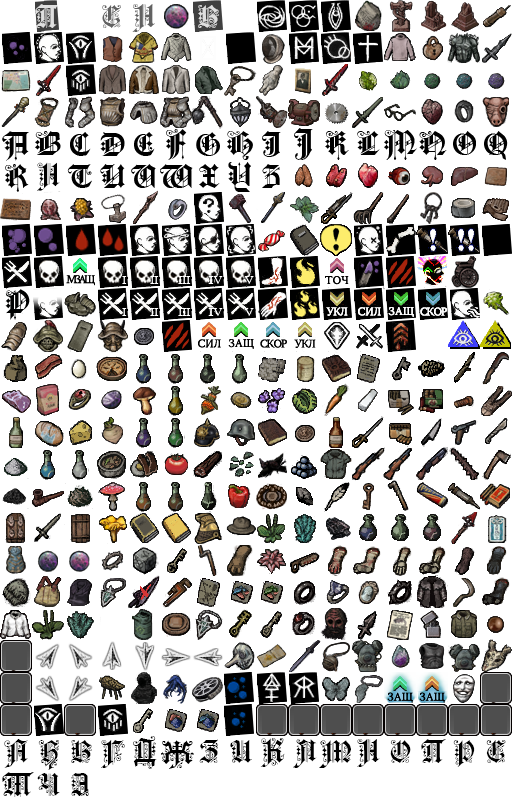
<style>
.page{position:relative;width:512px;height:800px;background:#ffffff}
.page>*{position:absolute;margin:0}
.t1{font:30px "FortunaGothicFlorishC";color:#dfdfdf}
.t2{font:30px "FortunaGothicFlorishC";color:#626262}
.t3{font:30px "FortunaGothicFlorishC";color:#000000}
.t4{font:12px "CrimsonText-Regular";letter-spacing:-0.2em;color:#000000}
.t5{font:12px "CrimsonText-Regular";color:#000000}
.t6{font:12px "CrimsonText-Regular";letter-spacing:-0.1em;color:#ffffff}
.t7{font:12px "CrimsonText-Regular";color:#ffffff}
.t8{font:12px "CrimsonText-Regular";letter-spacing:-0.1em;color:#000000}
</style>
<div class="page">
<p class="t1" style="left:35px;top:4px;width:25px;height:24px">П</p>
<p class="t2" style="left:102px;top:5px;width:19px;height:23px">С</p>
<p class="t2" style="left:132px;top:4px;width:23px;height:28px">Н</p>
<p class="t1" style="left:198px;top:5px;width:21px;height:23px">В</p>
<p class="t3" style="left:37px;top:162px;width:23px;height:29px">Н</p>
<p class="t4" style="left:66px;top:275px;width:29px;height:11px">МЗАЩ</p>
<p class="t4" style="left:66px;top:275px;width:29px;height:11px">МЗАЩ</p>
<p class="t5" style="left:325px;top:276px;width:24px;height:9px">ТОЧ</p>
<p class="t5" style="left:325px;top:276px;width:24px;height:9px">ТОЧ</p>
<p class="t6" style="left:326px;top:307px;width:22px;height:9px">УКЛ</p>
<p class="t6" style="left:326px;top:307px;width:22px;height:9px">УКЛ</p>
<p class="t7" style="left:358px;top:307px;width:23px;height:9px">СИЛ</p>
<p class="t7" style="left:358px;top:307px;width:23px;height:9px">СИЛ</p>
<p class="t7" style="left:388px;top:307px;width:26px;height:10px">ЗАЩ</p>
<p class="t7" style="left:388px;top:307px;width:26px;height:10px">ЗАЩ</p>
<p class="t6" style="left:420px;top:307px;width:27px;height:9px">СКОР</p>
<p class="t6" style="left:420px;top:307px;width:27px;height:9px">СКОР</p>
<p class="t5" style="left:198px;top:339px;width:23px;height:9px">СИЛ</p>
<p class="t5" style="left:198px;top:339px;width:23px;height:9px">СИЛ</p>
<p class="t5" style="left:228px;top:339px;width:26px;height:10px">ЗАЩ</p>
<p class="t5" style="left:228px;top:339px;width:26px;height:10px">ЗАЩ</p>
<p class="t8" style="left:260px;top:339px;width:27px;height:9px">СКОР</p>
<p class="t8" style="left:260px;top:339px;width:27px;height:9px">СКОР</p>
<p class="t8" style="left:294px;top:339px;width:22px;height:9px">УКЛ</p>
<p class="t8" style="left:294px;top:339px;width:22px;height:9px">УКЛ</p>
<p class="t5" style="left:387px;top:692px;width:26px;height:11px">ЗАЩ</p>
<p class="t5" style="left:387px;top:692px;width:26px;height:11px">ЗАЩ</p>
<p class="t5" style="left:419px;top:692px;width:26px;height:11px">ЗАЩ</p>
<p class="t5" style="left:419px;top:692px;width:26px;height:11px">ЗАЩ</p>
<p class="t3" style="left:133px;top:736px;width:24px;height:33px">Д</p>
<p class="t3" style="left:4px;top:739px;width:24px;height:29px">А</p>
<p class="t3" style="left:38px;top:740px;width:21px;height:30px">Б</p>
<p class="t3" style="left:71px;top:740px;width:21px;height:23px">В</p>
<p class="t3" style="left:101px;top:740px;width:24px;height:28px">Г</p>
<p class="t3" style="left:161px;top:740px;width:33px;height:29px">Ж</p>
<p class="t3" style="left:199px;top:739px;width:20px;height:24px">З</p>
<p class="t3" style="left:230px;top:740px;width:22px;height:23px">И</p>
<p class="t3" style="left:260px;top:738px;width:25px;height:29px">К</p>
<p class="t3" style="left:293px;top:739px;width:24px;height:29px">Л</p>
<p class="t3" style="left:319px;top:740px;width:32px;height:28px">М</p>
<p class="t3" style="left:357px;top:739px;width:23px;height:28px">Н</p>
<p class="t3" style="left:390px;top:740px;width:21px;height:23px">О</p>
<p class="t3" style="left:421px;top:739px;width:25px;height:24px">П</p>
<p class="t3" style="left:453px;top:740px;width:22px;height:27px">Р</p>
<p class="t3" style="left:486px;top:740px;width:20px;height:23px">С</p>
<p class="t3" style="left:2px;top:772px;width:32px;height:25px">Т</p>
<p class="t3" style="left:37px;top:773px;width:23px;height:23px">Ч</p>
<p class="t3" style="left:71px;top:773px;width:18px;height:23px">Э</p>
</div>
